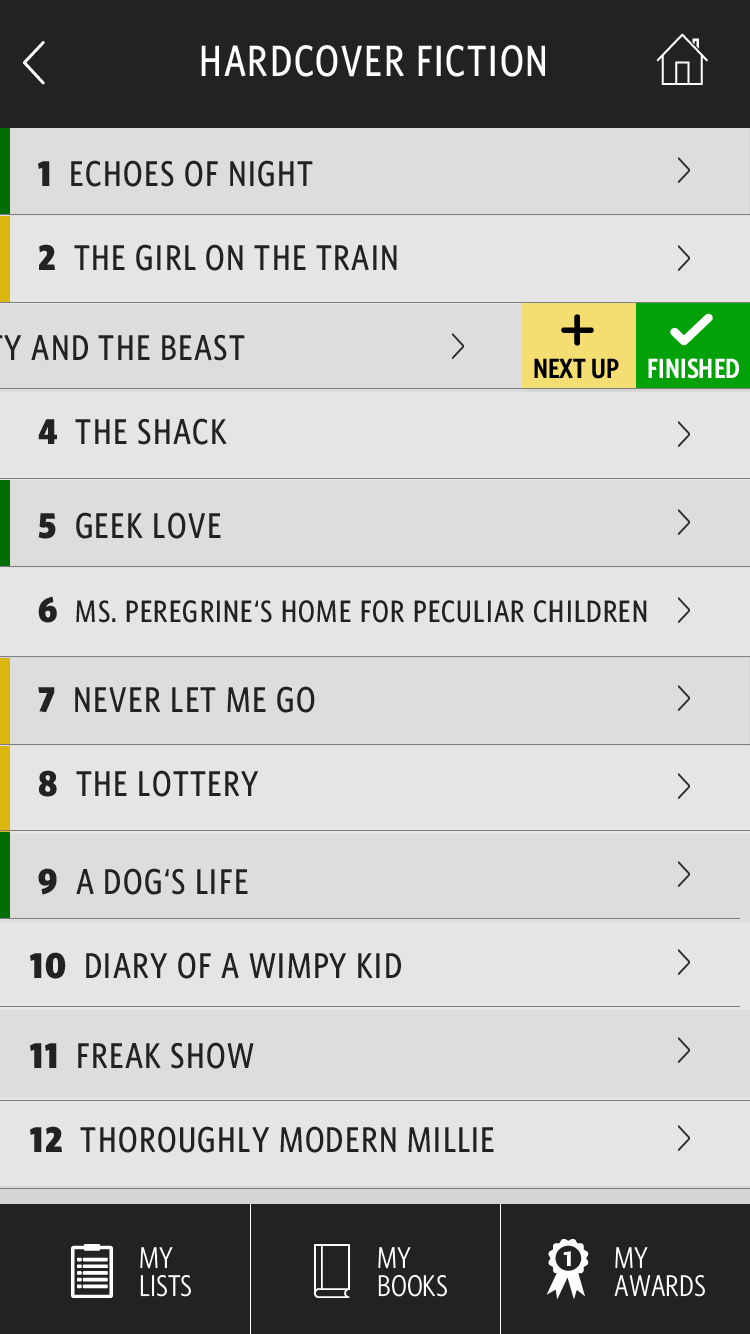
<style>
.page{position:relative;width:750px;height:1334px;background:#dddddd}
.page>*{position:absolute;margin:0}
.t1{font:44px "WhitneyCondensed-Medium";letter-spacing:0.04em;color:#ffffff}
.t2{font:36px "WhitneyCondensed-Medium";letter-spacing:0.04em;color:#222222}
.t3{font:36px "WhitneyCondensed-Black";letter-spacing:0.04em;color:#222222}
.t4{font:28px "WhitneyCondensed-Semibold";color:#000000}
.t5{font:28px "WhitneyCondensed-Semibold";color:#ffffff}
.t6{font:31px "WhitneyCondensed-Medium";letter-spacing:0.04em;color:#222222}
.t7{font:30px/28px "WhitneyCondensed-Book";color:#ffffff}
</style>
<div class="page">
<p class="t1" style="left:201px;top:45px;width:344px;height:32px">HARDCOVER FICTION</p>
<p class="t2" style="left:38px;top:160px;width:275px;height:27px"><span class="t3"> 1</span>  ECHOES OF NIGHT</p>
<p class="t2" style="left:39px;top:244px;width:358px;height:27px"><span class="t3"> 2</span>  THE GIRL ON THE TRAIN</p>
<p class="t4" style="left:534px;top:358px;width:85px;height:21px">NEXT UP</p>
<p class="t4" style="left:534px;top:358px;width:85px;height:21px">NEXT UP</p>
<p class="t5" style="left:648px;top:358px;width:91px;height:21px">FINISHED</p>
<p class="t5" style="left:648px;top:358px;width:91px;height:21px">FINISHED</p>
<p class="t2" style="left:38px;top:418px;width:189px;height:27px"><span class="t3"> 4</span>  THE SHACK</p>
<p class="t2" style="left:38px;top:512px;width:183px;height:27px"><span class="t3"> 5</span>  GEEK LOVE</p>
<p class="t6" style="left:38px;top:596px;width:609px;height:27px"><span class="t3"> 6  </span>MS. PEREGRINE‘S HOME FOR PECULIAR CHILDREN</p>
<p class="t2" style="left:38px;top:686px;width:277px;height:27px"><span class="t3"> 7</span>  NEVER LET ME GO</p>
<p class="t2" style="left:38px;top:770px;width:221px;height:27px"><span class="t3"> 8</span>  THE LOTTERY</p>
<p class="t2" style="left:38px;top:868px;width:210px;height:27px"><span class="t3"> 9</span>  A DOG‘S LIFE</p>
<p class="t2" style="left:30px;top:952px;width:371px;height:27px"><span class="t3">10</span>  DIARY OF A WIMPY KID</p>
<p class="t2" style="left:30px;top:1042px;width:224px;height:27px"><span class="t3">11</span>  FREAK SHOW</p>
<p class="t2" style="left:30px;top:1126px;width:464px;height:27px"><span class="t3">12</span>  THOROUGHLY MODERN MILLIE</p>
<p class="t7" style="left:140px;top:1247px;width:51px;height:50px">MY<br>LISTS</p>
<p class="t7" style="left:378px;top:1247px;width:69px;height:50px">MY<br>BOOKS</p>
<p class="t7" style="left:614px;top:1247px;width:91px;height:50px">MY<br>AWARDS</p>
</div>
